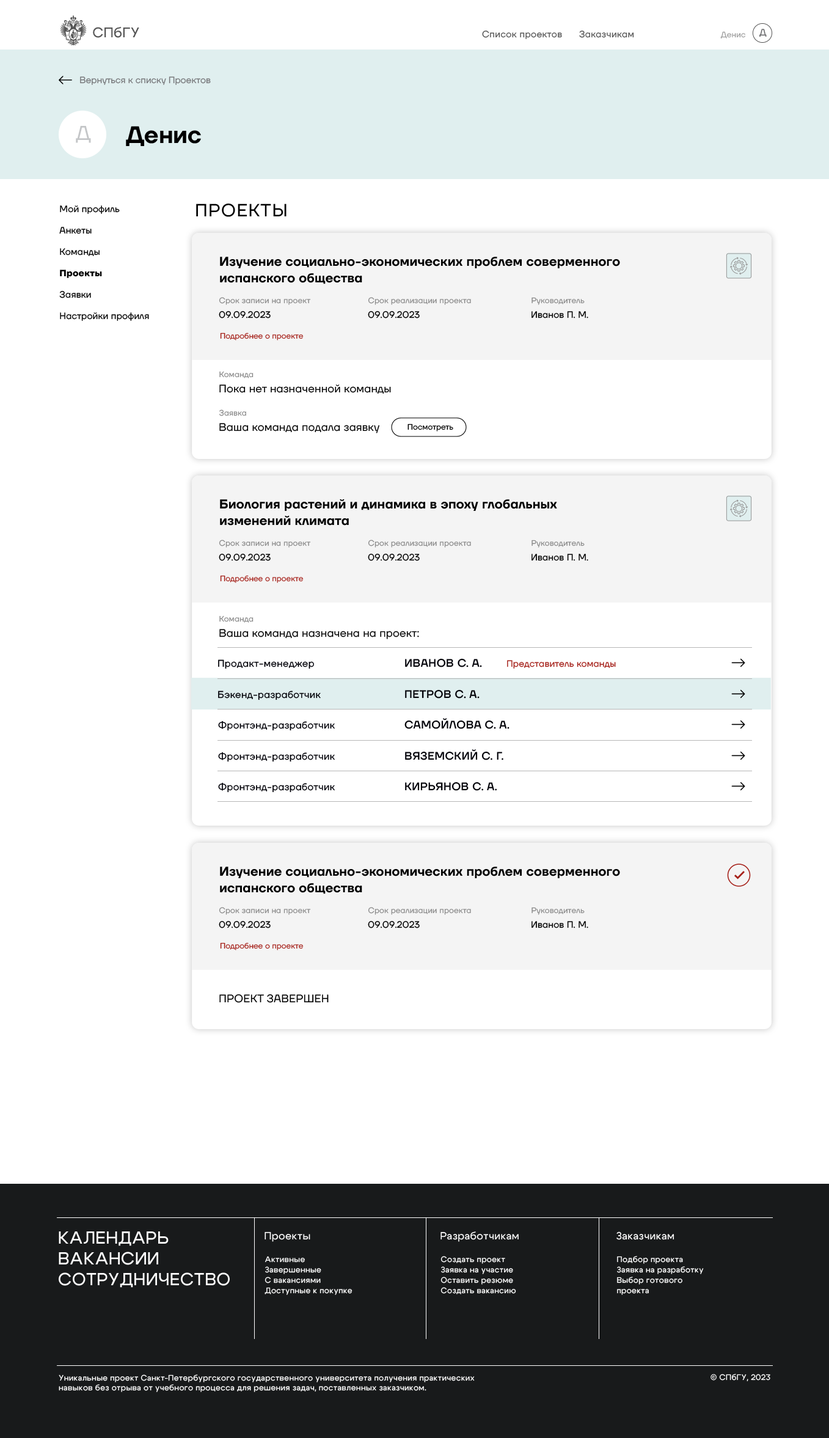
<style>
.page{position:relative;width:829px;height:1438px;background:#ffffff}
.page>*{position:absolute;margin:0}
.t1{font:13.8px "Cygre-Medium";letter-spacing:0.025em;color:#555555}
.t2{font:9.2px "TTFirsNeue-Regular";color:#636466}
.t3{font:9.2px "TTFirsNeue-Regular";letter-spacing:0.025em;color:#555555}
.t4{font:7.9px "TTFirsNeue-Regular";letter-spacing:0.01em;color:#9c9c9c}
.t5{font:9.2px "TTFirsNeue-Regular";color:#77787b}
.t6{font:20.2px "TTFirsNeue-Regular";color:#c4c6c8}
.t7{font:23.8px "TTFirsNeue-DemiBold";color:#000000}
.t8{font:9.2px/21.4px "TTFirsNeue-Regular";letter-spacing:0.013em;color:#000000}
.t9{font:9.2px/21.4px "TTFirsNeue-Bold";letter-spacing:0.013em;color:#000000}
.t10{font:17.7px "TTFirsNeue-Regular";letter-spacing:0.05em;color:#000000}
.t11{font:12.8px/16.5px "TTFirsNeue-DemiBold";letter-spacing:0.01em;color:#000000}
.t12{font:7.9px "TTFirsNeue-Regular";letter-spacing:0.01em;color:#898989}
.t13{font:9.2px "TTFirsNeue-Regular";letter-spacing:0.01em;color:#000000}
.t14{font:7.9px "TTFirsNeue-Regular";color:#a52019}
.t15{font:11px "TTFirsNeue-Regular";letter-spacing:0.01em;color:#000000}
.t16{font:7.9px "TTFirsNeue-Regular";color:#000000}
.t17{font:9.8px "TTFirsNeue-Regular";letter-spacing:0.025em;color:#000007}
.t18{font:11px "TTFirsNeue-Medium";letter-spacing:0.025em;color:#000007}
.t19{font:9.2px "TTFirsNeue-Regular";letter-spacing:0.01em;color:#a52019}
.t20{font:17.4px "Cygre-Medium";letter-spacing:0.025em;color:#ffffff}
.t21{font:10.4px "Cygre-Medium";letter-spacing:0.025em;color:#ffffff}
.t22{font:8px/10.4px "Cygre-Medium";letter-spacing:0.025em;color:#ffffff}
.t23{font:8px "Cygre-Medium";letter-spacing:0.025em;color:#ffffff}
</style>
<div class="page">
<p class="t1" style="left:93px;top:26px;width:46px;height:12px">СПбГУ</p>
<p class="t2" style="left:760px;top:29px;width:7px;height:8px">Д</p>
<p class="t3" style="left:482px;top:31px;width:152px;height:8px">Список проектов      Заказчикам</p>
<p class="t4" style="left:720px;top:31px;width:26px;height:7px">Денис</p>
<p class="t5" style="left:80px;top:76px;width:131px;height:9px">Вернуться к списку Проектов</p>
<p class="t6" style="left:76px;top:126px;width:15px;height:17px">Д</p>
<p class="t7" style="left:126px;top:126px;width:75px;height:20px">Денис</p>
<p class="t8" style="left:59px;top:205px;width:90px;height:116px">Мой профиль<br>Анкеты<br>Команды<br><span class="t9">Проекты<br></span>Заявки<br>Настройки профиля</p>
<p class="t10" style="left:196px;top:203px;width:91px;height:14px">ПРОЕКТЫ</p>
<p class="t11" style="left:220px;top:257px;width:400px;height:27px">Изучение социально-экономических проблем соверменного<br>испанского общества</p>
<p class="t12" style="left:219px;top:297px;width:92px;height:8px">Срок записи на проект</p>
<p class="t12" style="left:368px;top:297px;width:103px;height:8px">Срок реализации проекта</p>
<p class="t12" style="left:532px;top:297px;width:53px;height:8px">Руководитель</p>
<p class="t13" style="left:219px;top:311px;width:52px;height:7px">09.09.2023</p>
<p class="t13" style="left:368px;top:311px;width:52px;height:7px">09.09.2023</p>
<p class="t13" style="left:532px;top:311px;width:56px;height:7px">Иванов П. М.</p>
<p class="t14" style="left:220px;top:332px;width:84px;height:8px">Подробнее о проекте</p>
<p class="t12" style="left:219px;top:371px;width:35px;height:7px">Команда</p>
<p class="t15" style="left:219px;top:384px;width:172px;height:10px">Пока нет назначенной команды</p>
<p class="t12" style="left:219px;top:409px;width:27px;height:7px">Заявка</p>
<p class="t15" style="left:219px;top:423px;width:160px;height:10px">Ваша команда подала заявку</p>
<p class="t16" style="left:408px;top:423px;width:45px;height:8px">Посмотреть</p>
<p class="t11" style="left:220px;top:499px;width:337px;height:27px">Биология растений и динамика в эпоху глобальных<br>изменений климата</p>
<p class="t12" style="left:219px;top:540px;width:92px;height:8px">Срок записи на проект</p>
<p class="t12" style="left:368px;top:540px;width:103px;height:8px">Срок реализации проекта</p>
<p class="t12" style="left:532px;top:540px;width:53px;height:8px">Руководитель</p>
<p class="t13" style="left:219px;top:554px;width:52px;height:7px">09.09.2023</p>
<p class="t13" style="left:368px;top:554px;width:52px;height:7px">09.09.2023</p>
<p class="t13" style="left:532px;top:554px;width:56px;height:7px">Иванов П. М.</p>
<p class="t14" style="left:220px;top:575px;width:84px;height:8px">Подробнее о проекте</p>
<p class="t12" style="left:219px;top:615px;width:35px;height:8px">Команда</p>
<p class="t15" style="left:219px;top:629px;width:200px;height:10px">Ваша команда назначена на проект:</p>
<p class="t17" style="left:218px;top:659px;width:96px;height:10px">Продакт-менеджер</p>
<p class="t18" style="left:405px;top:658px;width:77px;height:9px">ИВАНОВ С. А.</p>
<p class="t19" style="left:507px;top:660px;width:109px;height:9px">Представитель команды</p>
<p class="t18" style="left:405px;top:689px;width:75px;height:9px">ПЕТРОВ С. А.</p>
<p class="t17" style="left:218px;top:691px;width:103px;height:9px">Бэкенд-разработчик</p>
<p class="t17" style="left:218px;top:720px;width:117px;height:11px">Фронтэнд-разработчик</p>
<p class="t18" style="left:405px;top:718px;width:105px;height:11px">САМОЙЛОВА С. А.</p>
<p class="t18" style="left:405px;top:749px;width:99px;height:11px">ВЯЗЕМСКИЙ С. Г.</p>
<p class="t17" style="left:218px;top:752px;width:117px;height:10px">Фронтэнд-разработчик</p>
<p class="t17" style="left:218px;top:782px;width:117px;height:11px">Фронтэнд-разработчик</p>
<p class="t18" style="left:405px;top:782px;width:92px;height:9px">КИРЬЯНОВ С. А.</p>
<p class="t11" style="left:220px;top:867px;width:400px;height:27px">Изучение социально-экономических проблем соверменного<br>испанского общества</p>
<p class="t12" style="left:219px;top:907px;width:92px;height:8px">Срок записи на проект</p>
<p class="t12" style="left:368px;top:907px;width:103px;height:8px">Срок реализации проекта</p>
<p class="t12" style="left:532px;top:907px;width:53px;height:8px">Руководитель</p>
<p class="t13" style="left:219px;top:921px;width:52px;height:7px">09.09.2023</p>
<p class="t13" style="left:368px;top:921px;width:52px;height:7px">09.09.2023</p>
<p class="t13" style="left:532px;top:921px;width:56px;height:7px">Иванов П. М.</p>
<p class="t14" style="left:220px;top:942px;width:84px;height:8px">Подробнее о проекте</p>
<p class="t15" style="left:219px;top:994px;width:110px;height:9px">ПРОЕКТ ЗАВЕРШЕН</p>
<p class="t20" style="left:59px;top:1231px;width:171px;height:57px">КАЛЕНДАРЬ<br>ВАКАНСИИ<br>СОТРУДНИЧЕСТВО</p>
<p class="t21" style="left:265px;top:1231px;width:45px;height:11px">Проекты</p>
<p class="t21" style="left:441px;top:1231px;width:78px;height:11px">Разработчикам</p>
<p class="t21" style="left:617px;top:1231px;width:58px;height:9px">Заказчикам</p>
<p class="t22" style="left:265px;top:1256px;width:88px;height:39px">Активные<br>Завершенные<br>С вакансиями<br>Доступные к покупке</p>
<p class="t22" style="left:441px;top:1256px;width:75px;height:38px">Создать проект<br>Заявка на участие<br>Оставить резюме<br>Создать вакансию</p>
<p class="t22" style="left:617px;top:1256px;width:87px;height:39px">Подбор проекта<br>Заявка на разработку<br>Выбор готового<br>проекта</p>
<p class="t23" style="left:711px;top:1374px;width:60px;height:8px">© СПбГУ, 2023</p>
<p class="t23" style="left:59px;top:1374px;width:416px;height:18px">Уникальные проект Санкт-Петербургского государственного университета получения практических навыков без отрыва от учебного процесса для решения задач, поставленных заказчиком.</p>
</div>
